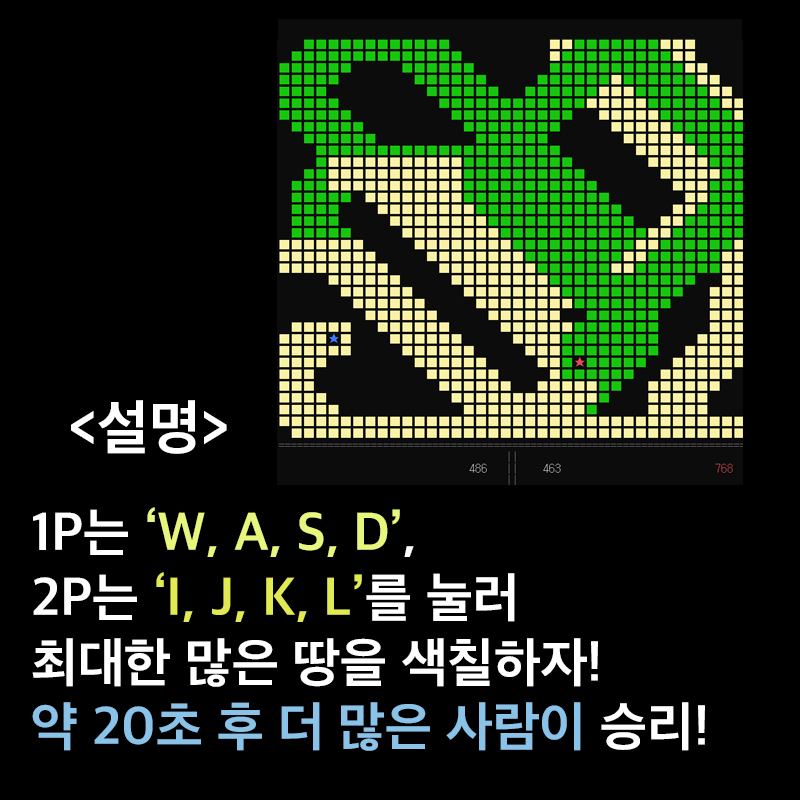
<style>
.page{position:relative;width:800px;height:800px;background:#000000}
.page>*{position:absolute;margin:0}
.t1{font:60px "AppleSDGothicNeoB00";color:#ffffff}
.t2{font:54px "AppleSDGothicNeoB00";color:#ffffff}
.t3{font:54px "AppleSDGothicNeoB00";color:#e9f67e}
.t4{font:54px "AppleSDGothicNeoB00";color:#e1ea52}
.t5{font:54px "AppleSDGothicNeoB00";color:#8ac3e7}
</style>
<div class="page">
<p class="t1" style="left:71px;top:400px;width:156px;height:54px">&lt;설명&gt;</p>
<p class="t2" style="left:32px;top:507px;width:673px;height:244px">1P는 <span class="t3">‘W, A, S, D’</span>,<br>2P는 <span class="t4">‘I, J, K, L’</span>를 눌러<br>최대한 많은 땅을 색칠하자!<br><span class="t5">약 20초 후 더 많은 사람이</span> 승리!</p>
</div>
